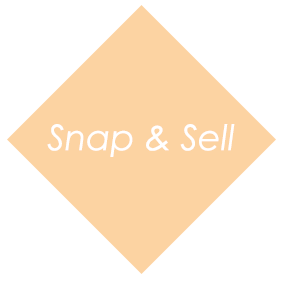
<style>
.page{position:relative;width:283px;height:283px;background:#ffffff}
.page>*{position:absolute;margin:0}
.t1{font:35.2px "CenturyGothic-Italic";color:#ffffff}
</style>
<div class="page">
<p class="t1" style="left:47px;top:124px;width:188px;height:33px">Snap &amp; Sell</p>
</div>
